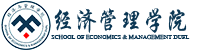
<style>
.page{position:relative;width:200px;height:50px;background:#ffffff}
.page>*{position:absolute;margin:0}
.t1{font:26.6px "CTXingKaiSJ";color:#0a3653;scale:0.86 1}
.t2{font:6px "CTXingKaiSJ";color:#0a3653}
</style>
<div class="page">
<p class="t1" style="left:54px;top:8px;width:133px;height:25px">经济管理学院</p>
<p class="t2" style="left:51px;top:34px;width:139px;height:6px">SCHOOL OF ECONOMICS &amp; MANAGEMENT DUFL</p>
</div>
